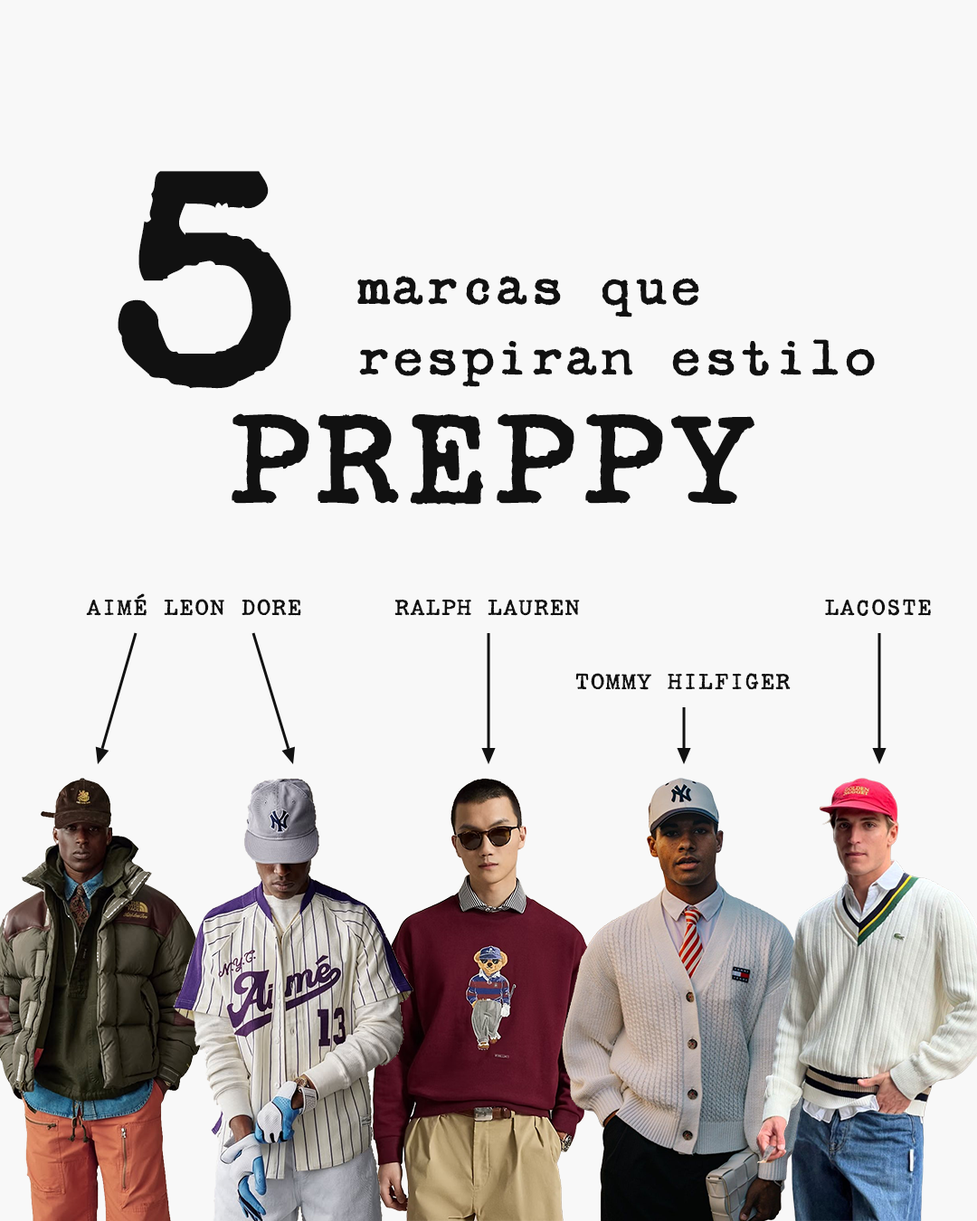
<style>
.page{position:relative;width:977px;height:1221px;background:#f8f8f8}
.page>*{position:absolute;margin:0}
.t1{font:364.3px "SecretServiceTypewriterRR-Regular";color:#111111}
.t2{font:59.3px "SecretServiceTypewriterRR-Regular";color:#111111}
.t3{font:150.9px "SecretServiceTypewriterRR-Regular";color:#111111}
.t4{font:26.4px "SecretServiceTypewriterRR-Regular";color:#111111}
</style>
<div class="page">
<p class="t1" style="left:118px;top:171px;width:173px;height:218px">5</p>
<p class="t2" style="left:357px;top:276px;width:518px;height:111px">marcas que<br>respiran estilo</p>
<p class="t3" style="left:232px;top:413px;width:522px;height:92px">PREPPY</p>
<p class="t4" style="left:86px;top:593px;width:215px;height:23px">AIMÉ LEON DORE</p>
<p class="t4" style="left:394px;top:599px;width:186px;height:17px">RALPH LAUREN</p>
<p class="t4" style="left:825px;top:599px;width:106px;height:17px">LACOSTE</p>
<p class="t4" style="left:575px;top:673px;width:215px;height:17px">TOMMY HILFIGER</p>
</div>
